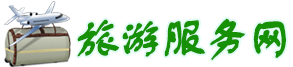
<style>
.page{position:relative;width:293px;height:67px;background:#ffffff}
.page>*{position:absolute;margin:0}
.t1{font:46.7px "FZSTK--GBK1-0";letter-spacing:-0.1em;color:#169004;font-weight:bold}
</style>
<div class="page">
<p class="t1" style="left:77px;top:18px;width:209px;height:42px">旅游服务网</p>
</div>
